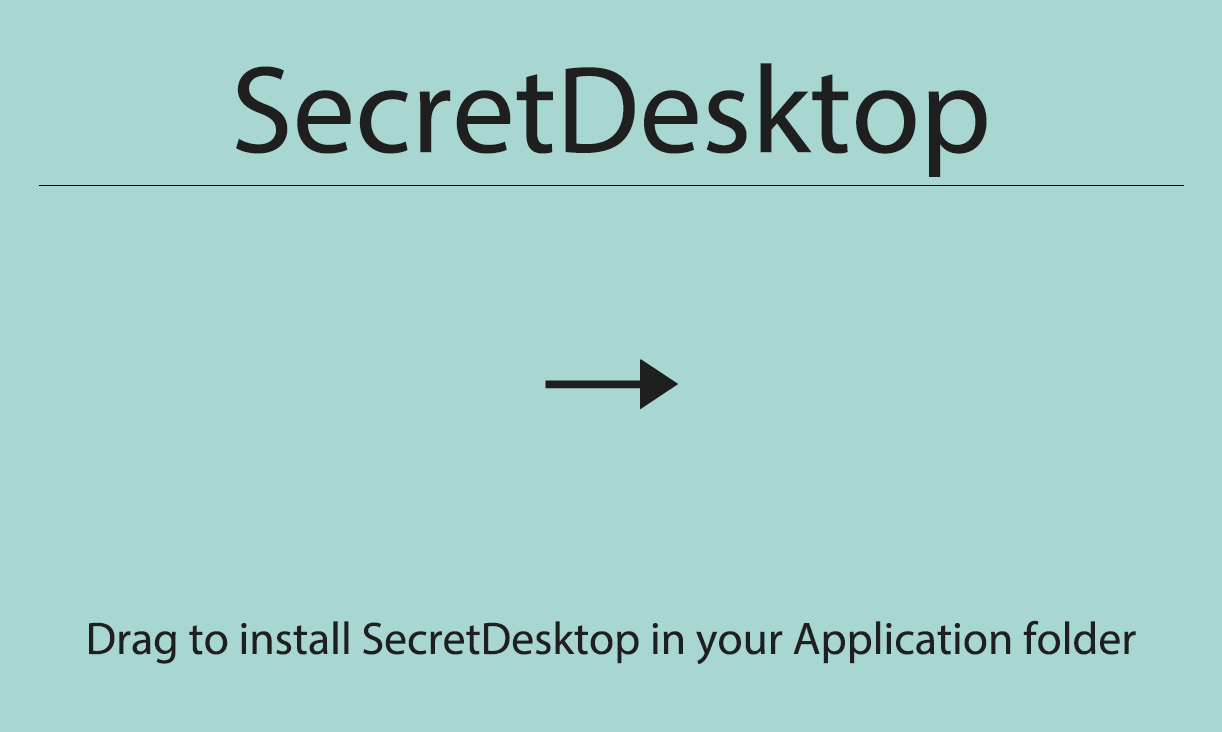
<style>
.page{position:relative;width:1222px;height:732px;background:#a8d6d0}
.page>*{position:absolute;margin:0}
.t1{font:125px "MyriadPro-Regular";color:#1f1f1f}
.t2{font:45.8px "MyriadPro-Regular";color:#1f1f1f}
</style>
<div class="page">
<p class="t1" style="left:236px;top:63px;width:751px;height:114px">SecretDesktop</p>
<p class="t2" style="left:89px;top:620px;width:1047px;height:45px">Drag to install SecretDesktop in your Application folder</p>
</div>
